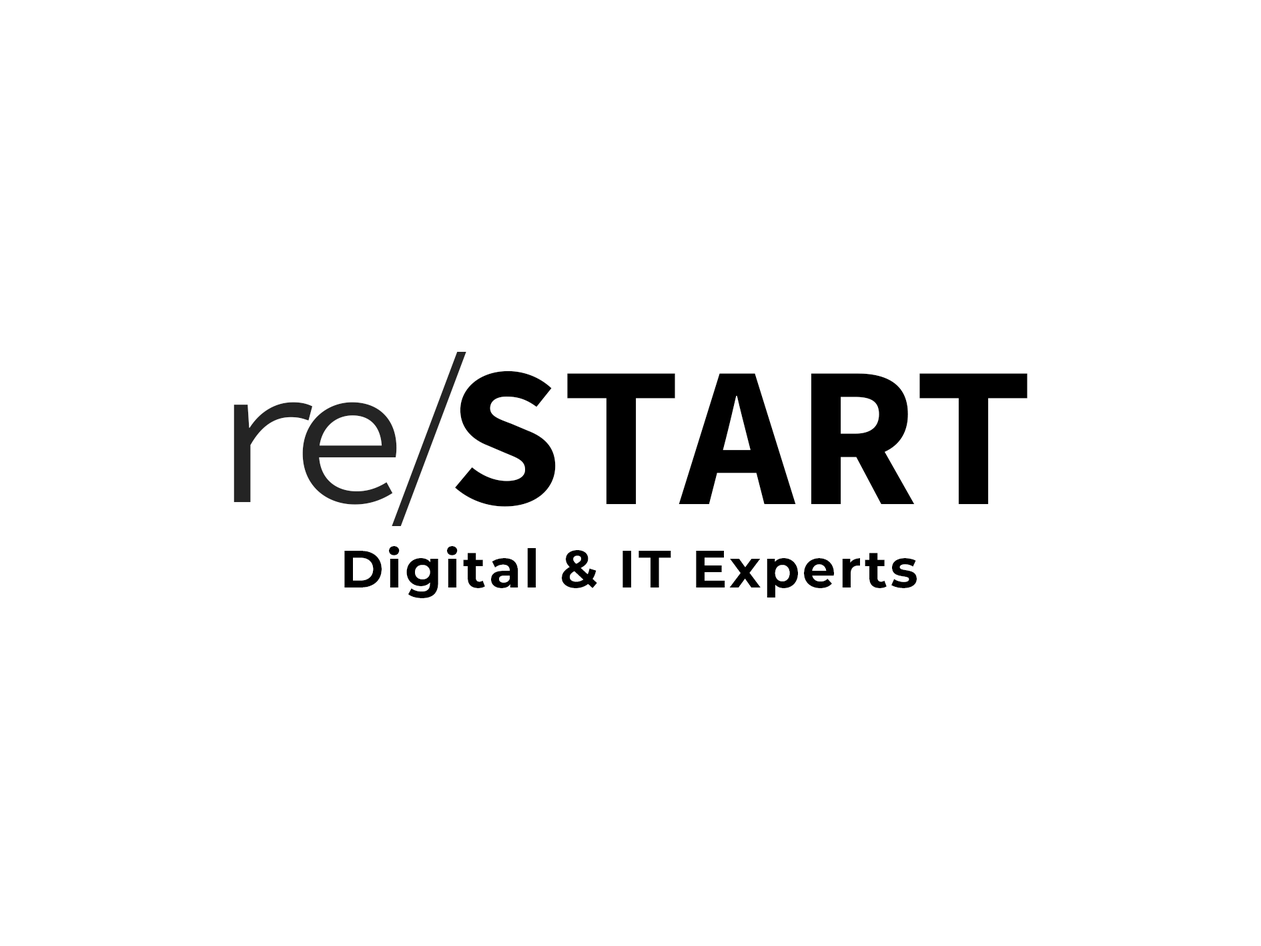
<style>
.page{position:relative;width:1261px;height:946px;background:#ffffff}
.page>*{position:absolute;margin:0}
.t1{font:200.2px "SourceCodePro-Light";color:#242424}
.t2{font:200.2px "SourceCodePro-Bold";color:#000000}
.t3{font:200.2px "SourceCodePro-Regular";letter-spacing:-0.18em;color:#242424}
.t4{font:52.8px "Montserrat-Bold";letter-spacing:0.05em;color:#000000}
</style>
<div class="page">
<p class="t1" style="left:392px;top:352px;width:74px;height:174px">/</p>
<p class="t2" style="left:455px;top:370px;width:573px;height:136px">START</p>
<p class="t3" style="left:234px;top:402px;width:163px;height:102px">re</p>
<p class="t4" style="left:344px;top:546px;width:573px;height:52px">Digital &amp; IT Experts</p>
</div>
